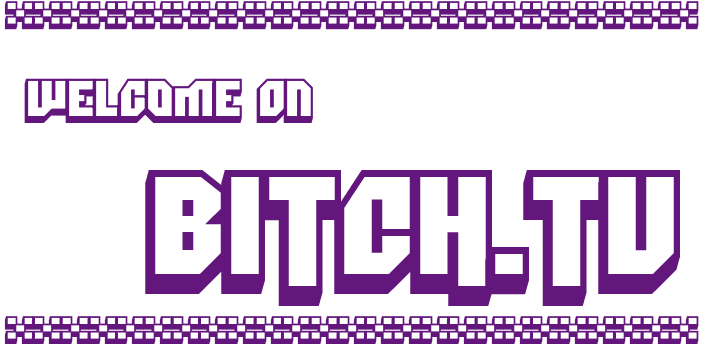
<style>
.page{position:relative;width:705px;height:344px;background:#ffffff}
.page>*{position:absolute;margin:0}
.t1{font:40px "DimitriSwank";color:#63167c}
.t2{font:50px "DimitriSwank";color:#63167c}
.t3{font:140px "DimitriSwank";color:#63167c}
</style>
<div class="page">
<p class="t1" style="left:4px;top:1px;width:695px;height:29px">**************************</p>
<p class="t2" style="left:24px;top:78px;width:289px;height:45px">Welcome On</p>
<p class="t3" style="left:145px;top:170px;width:535px;height:136px">BITCH.TV</p>
<p class="t1" style="left:4px;top:316px;width:695px;height:29px">**************************</p>
</div>
